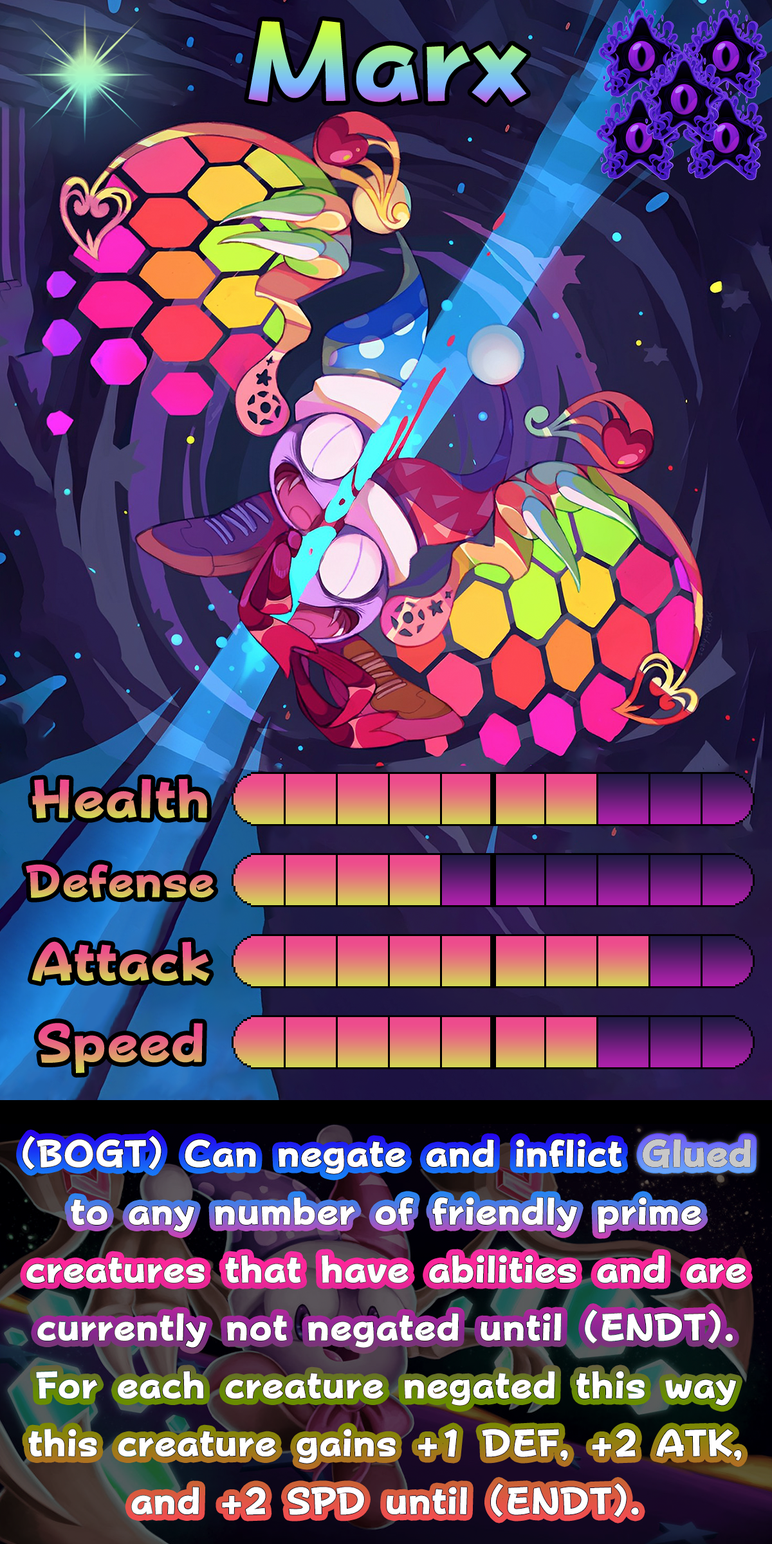
<style>
.page{position:relative;width:772px;height:1544px}
.page>*{position:absolute;margin:0}
.t1{font:194.3px "FOTPopHappinessStrp-ExtraBold"}
.t2{font:92.7px "FOTPopHappinessStrp-ExtraBold"}
.t3{font:77.9px "FOTPopHappinessStrp-ExtraBold"}
.t4{font:64.3px/57.9px "FOTPopHappinessStrp-ExtraBold";color:#ffffff}
.t5{font:64.3px "FOTPopHappinessStrp-ExtraBold";color:#c8c8c8}
</style>
<div class="page">
<p class="t1" style="left:248px;top:21px;width:279px;height:82px">Marx</p>
<p class="t2" style="left:32px;top:779px;width:175px;height:39px">Health</p>
<p class="t3" style="left:26px;top:864px;width:188px;height:34px">Defense</p>
<p class="t2" style="left:32px;top:941px;width:178px;height:41px">Attack</p>
<p class="t2" style="left:38px;top:1023px;width:165px;height:50px">Speed</p>
<p class="t4" style="left:23px;top:1136px;width:728px;height:381px;text-align:center">(BOGT) Can negate and inflict Glued to any number of friendly prime creatures that have abilities and are currently not negated until (ENDT). For each creature negated this way this creature gains +1 DEF, +2 ATK, and +2 SPD until (ENDT).</p>
<p class="t5" style="left:643px;top:1140px;width:108px;height:28px">Glued</p>
</div>
